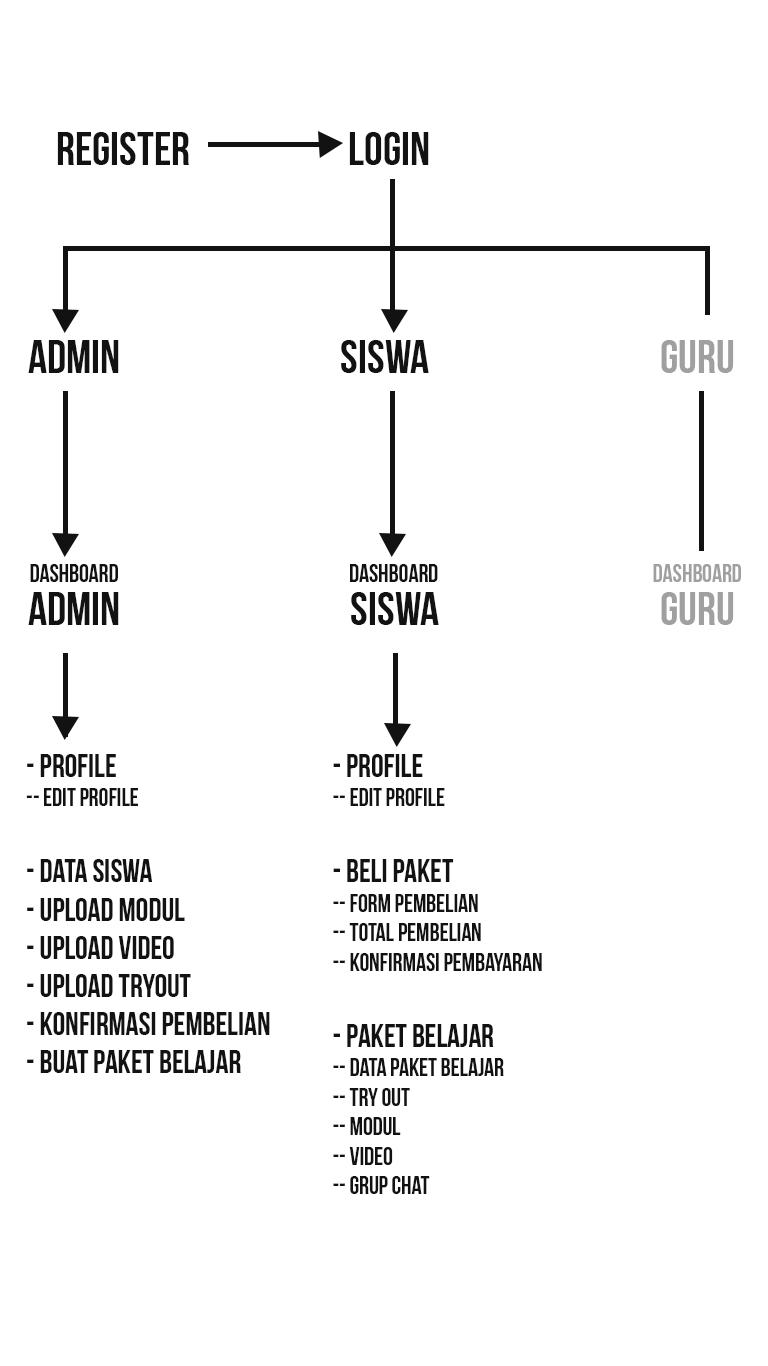
<style>
.page{position:relative;width:768px;height:1366px;background:#ffffff}
.page>*{position:absolute;margin:0}
.t1{font:47px "BebasNeueBold";color:#121212}
.t2{font:47px "BebasNeueBold";color:#a0a0a0}
.t3{font:24.5px "BebasNeueBold";color:#121212}
.t4{font:24.5px "BebasNeueBold";color:#a0a0a0}
.t5{font:31.8px "BebasNeueBold";color:#121212}
</style>
<div class="page">
<p class="t1" style="left:57px;top:132px;width:132px;height:33px">Register</p>
<p class="t1" style="left:349px;top:132px;width:80px;height:33px">Login</p>
<p class="t1" style="left:28px;top:340px;width:91px;height:33px">Admin</p>
<p class="t1" style="left:341px;top:340px;width:88px;height:33px">Siswa</p>
<p class="t2" style="left:661px;top:340px;width:73px;height:33px">Guru</p>
<p class="t3" style="left:30px;top:564px;width:88px;height:18px">dashboard</p>
<p class="t3" style="left:350px;top:564px;width:88px;height:18px">dashboard</p>
<p class="t4" style="left:653px;top:564px;width:88px;height:18px">dashboard</p>
<p class="t1" style="left:28px;top:592px;width:91px;height:33px">Admin</p>
<p class="t1" style="left:351px;top:592px;width:88px;height:33px">Siswa</p>
<p class="t2" style="left:661px;top:592px;width:73px;height:33px">Guru</p>
<p class="t5" style="left:26px;top:754px;width:244px;height:319px">- Profile<br><span class="t3">-- edit Profile<br></span><br>- Data siswa<br>- Upload Modul<br>- Upload Video<br>- Upload Tryout<br>- Konfirmasi Pembelian<br>- buat paket belajar</p>
<p class="t3" style="left:333px;top:754px;width:209px;height:440px"><span class="t5">- Profile<br></span>-- edit Profile<br><span class="t5"><br>- Beli Paket<br></span>-- Form pembelian<br>-- Total pembelian<br>-- Konfirmasi pembayaran<br><span class="t5"><br>- Paket Belajar<br></span>-- Data paket Belajar<br>-- Try OUt<br>-- Modul<br>-- Video<br>-- Grup Chat</p>
</div>
